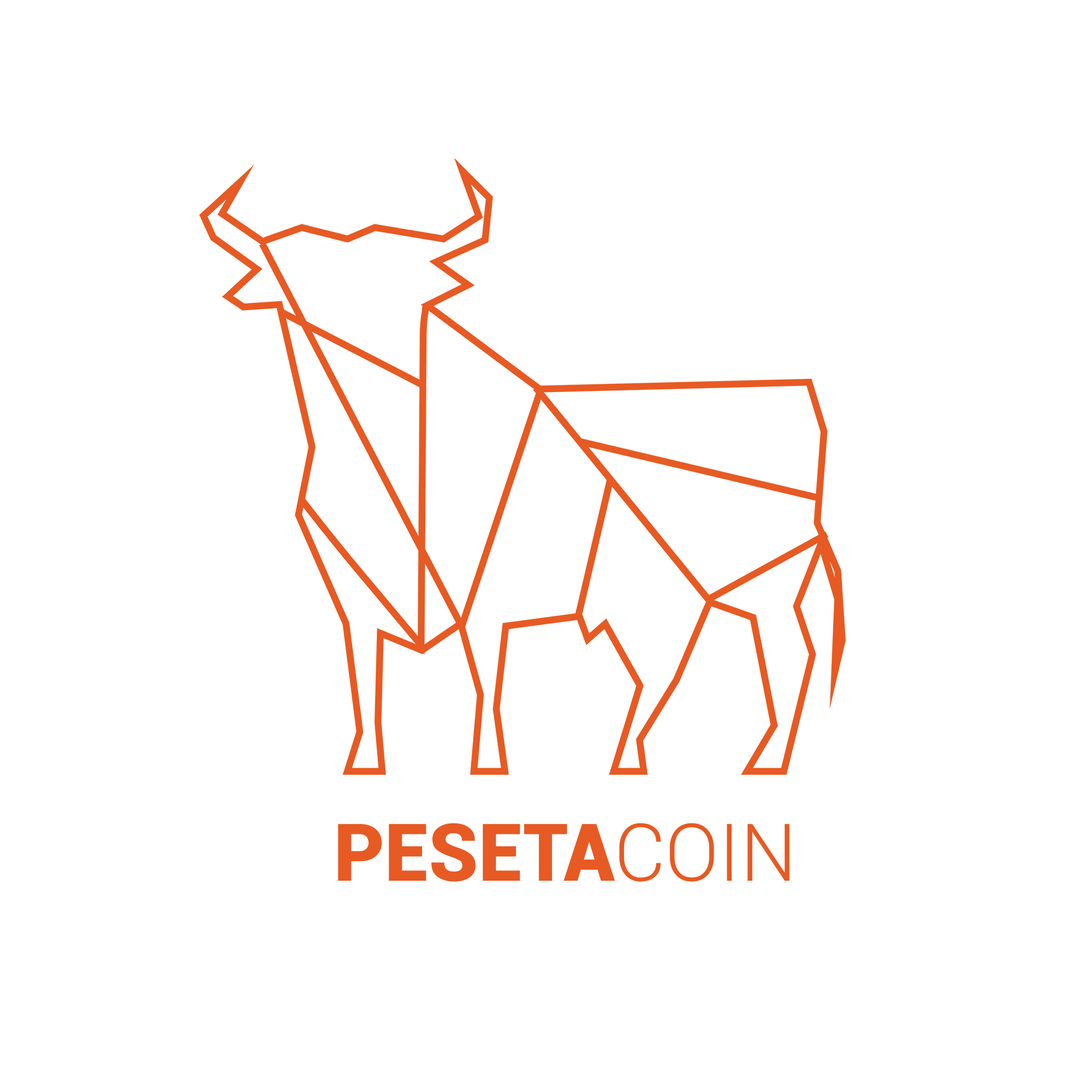
<style>
.page{position:relative;width:1092px;height:1092px;background:#ffffff}
.page>*{position:absolute;margin:0}
.t1{font:79.6px "Roboto-Black";color:#e75a23}
.t2{font:79.6px "Roboto-Light";color:#e75a23}
</style>
<div class="page">
<p class="t1" style="left:338px;top:823px;width:452px;height:59px">PESETA<span class="t2">COIN</span></p>
</div>
